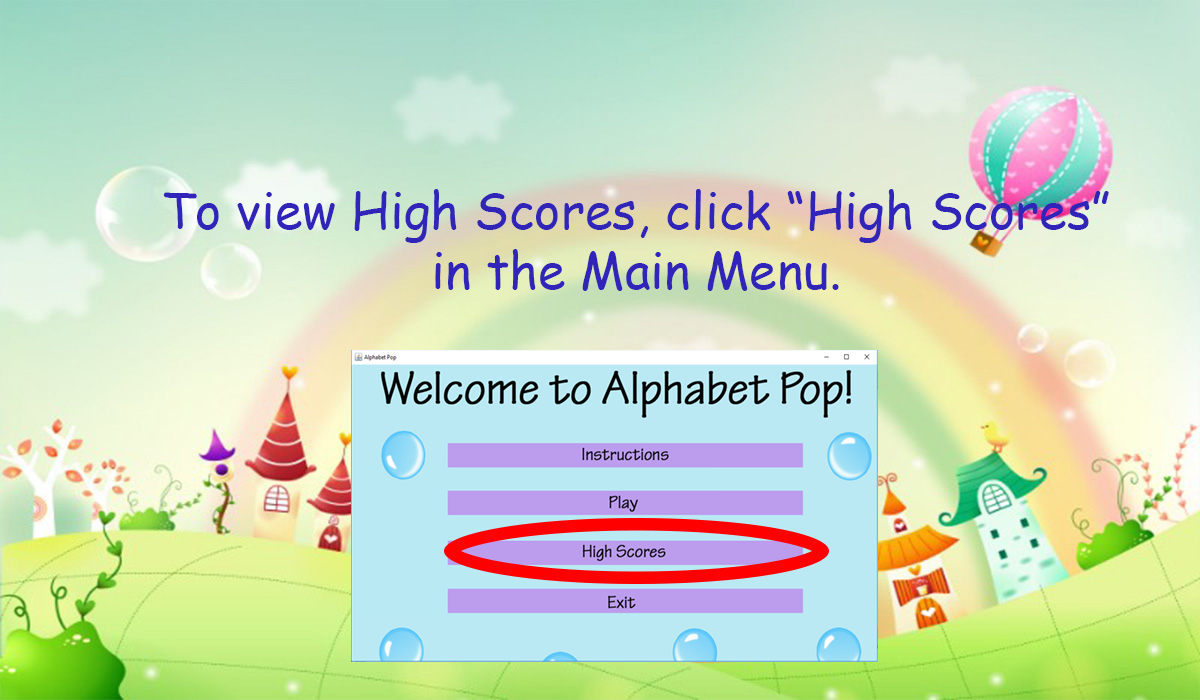
<style>
.page{position:relative;width:1200px;height:700px}
.page>*{position:absolute;margin:0}
.t1{font:12px "ComicSansMS";color:#3124b9}
</style>
<div class="page">
<p class="t1" style="left:163px;top:189px;width:946px;height:102px;text-align:center">To view High Scores, click “High Scores” <br>in the Main Menu.</p>
</div>
